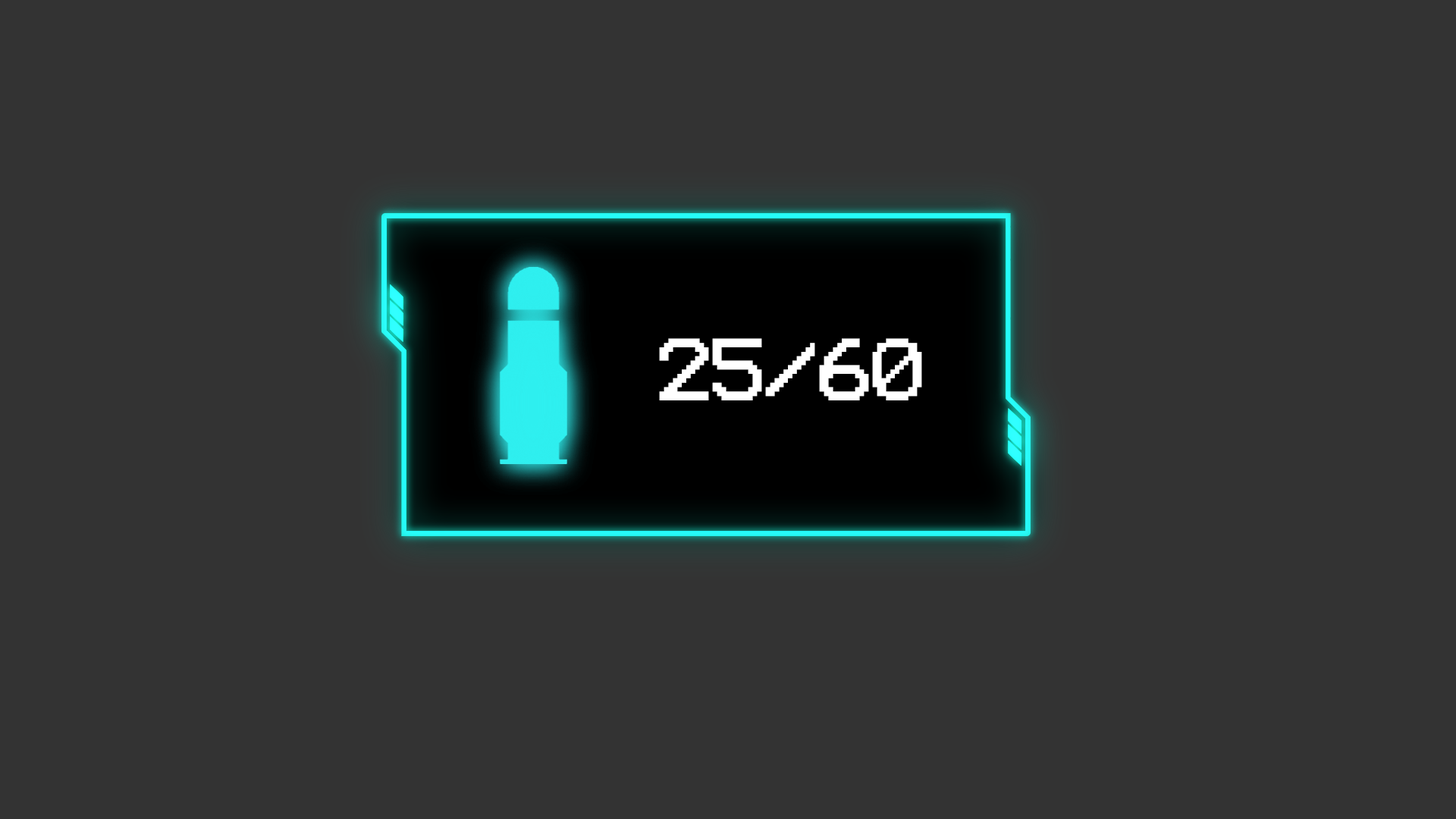
<style>
.page{position:relative;width:1456px;height:819px;background:#333333}
.page>*{position:absolute;margin:0}
.t1{font:70.7px "Terminal";color:#ffffff}
</style>
<div class="page">
<p class="t1" style="left:659px;top:338px;width:263px;height:62px">25/60</p>
</div>
